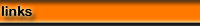
<style>
.page{position:relative;width:200px;height:26px;background:#ff7800}
.page>*{position:absolute;margin:0}
.t1{font:14px "ArialRoundedMTBold";color:#000000}
</style>
<div class="page">
<p class="t1" style="left:1px;top:6px;width:31px;height:10px">links</p>
</div>
